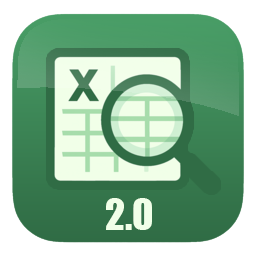
<style>
.page{position:relative;width:256px;height:256px;background:#ffffff}
.page>*{position:absolute;margin:0}
.t1{font:40px "Impact";color:#f1ffe8}
</style>
<div class="page">
<p class="t1" style="left:106px;top:198px;width:46px;height:32px">2.0</p>
</div>
